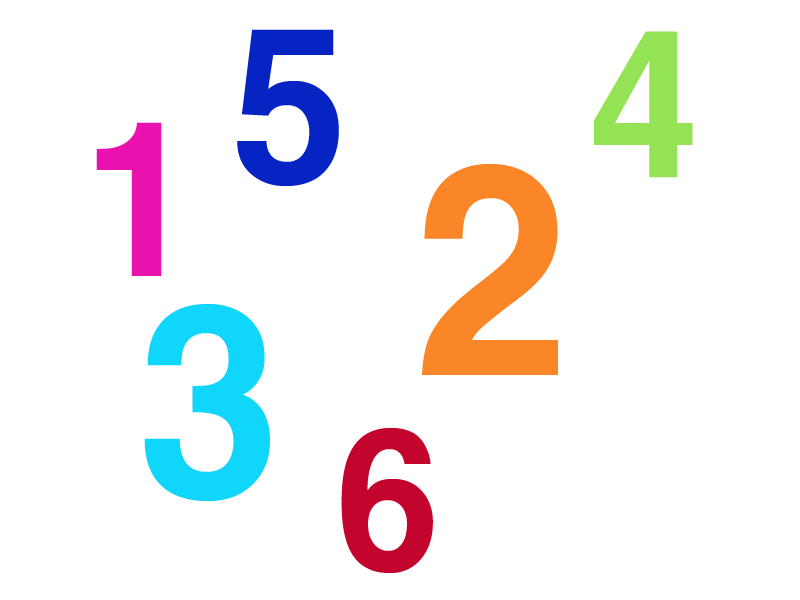
<style>
.page{position:relative;width:800px;height:600px;background:#ffffff}
.page>*{position:absolute;margin:0}
.t1{font:200px "HYgtrE";color:#0524c3}
.t2{font:190px "HYgtrE";color:#94e355}
.t3{font:200px "HYgtrE";color:#e912af}
.t4{font:270px "HYgtrE";color:#fb8627}
.t5{font:247.3px "HYgtrE";color:#0fd6fa}
.t6{font:180px "HYgtrE";color:#c3052d}
</style>
<div class="page">
<p class="t1" style="left:237px;top:29px;width:102px;height:157px">5</p>
<p class="t2" style="left:594px;top:31px;width:99px;height:147px">4</p>
<p class="t3" style="left:96px;top:122px;width:66px;height:154px">1</p>
<p class="t4" style="left:422px;top:163px;width:136px;height:212px">2</p>
<p class="t5" style="left:144px;top:303px;width:126px;height:198px">3</p>
<p class="t6" style="left:341px;top:427px;width:92px;height:146px">6</p>
</div>
